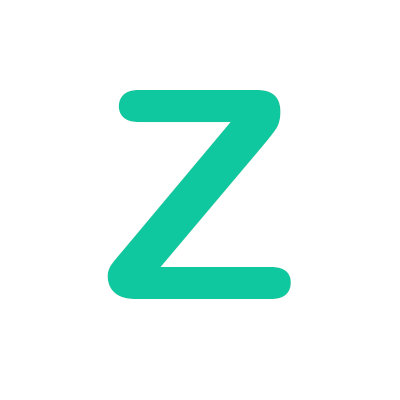
<style>
.page{position:relative;width:400px;height:400px;background:#ffffff}
.page>*{position:absolute;margin:0}
.t1{font:291.7px "ArialRoundedMTBold";color:#10c89f}
</style>
<div class="page">
<p class="t1" style="left:107px;top:90px;width:184px;height:209px">Z</p>
</div>
